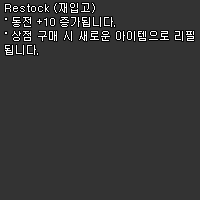
<style>
.page{position:relative;width:200px;height:200px;background:#333333}
.page>*{position:absolute;margin:0}
.t1{font:11px/14px "Dotum";color:#ffffff}
</style>
<div class="page">
<p class="t1" style="left:5px;top:3px;width:189px;height:52px">Restock (재입고)<br>˚ 동전 +10 증가됩니다.<br>˚ 상점 구매 시 새로운 아이템으로 리필<br>됩니다.</p>
</div>
